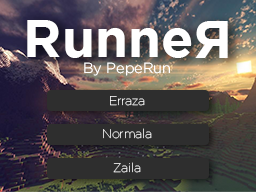
<style>
.page{position:relative;width:256px;height:192px}
.page>*{position:absolute;margin:0}
.t1{font:53.3px "Gotham-Bold";color:#ffffff}
.t2{font:14.6px "Gotham-Light";color:#ffffff}
.t3{font:12.5px "Gotham-Thin";color:#ffffff}
</style>
<div class="page">
<p class="t1" style="left:27px;top:20px;width:165px;height:38px">Runne</p>
<p class="t1" style="left:195px;top:21px;width:33px;height:37px;rotate:180deg">R</p>
<p class="t2" style="left:84px;top:62px;width:86px;height:14px">By PepeRun</p>
<p class="t3" style="left:110px;top:96px;width:35px;height:10px">Erraza</p>
</div>
